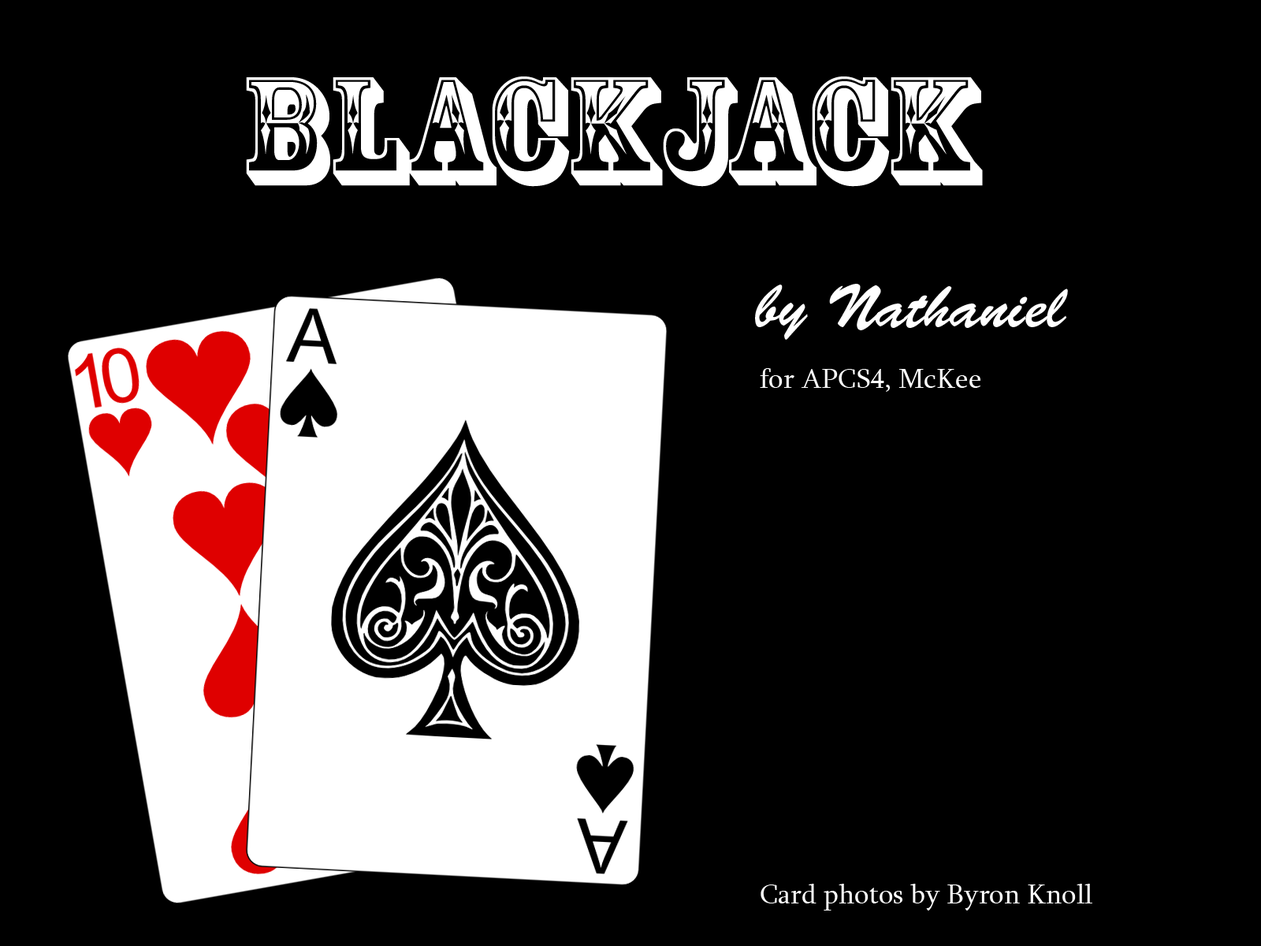
<style>
.page{position:relative;width:1261px;height:946px;background:#000000}
.page>*{position:absolute;margin:0}
.t1{font:144px "RosewoodStd-Regular";color:#ffffff}
.t2{font:60.7px "BrushScriptStd";color:#ffffff}
.t3{font:28.4px "Sylfaen";color:#ffffff}
</style>
<div class="page">
<p class="t1" style="left:246px;top:76px;width:737px;height:111px">BLACKJACK</p>
<p class="t2" style="left:755px;top:284px;width:313px;height:56px">by Nathaniel</p>
<p class="t3" style="left:760px;top:368px;width:220px;height:24px">for APCS4, McKee</p>
<p class="t3" style="left:760px;top:883px;width:332px;height:27px">Card photos by Byron Knoll</p>
</div>
